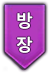
<style>
.page{position:relative;width:49px;height:73px}
.page>*{position:absolute;margin:0}
.t1{font:17px "MalgunGothicBold";color:#ffffff}
</style>
<div class="page">
<p class="t1" style="left:16px;top:12px;width:17px;height:41px;text-align:center">방 장</p>
</div>
